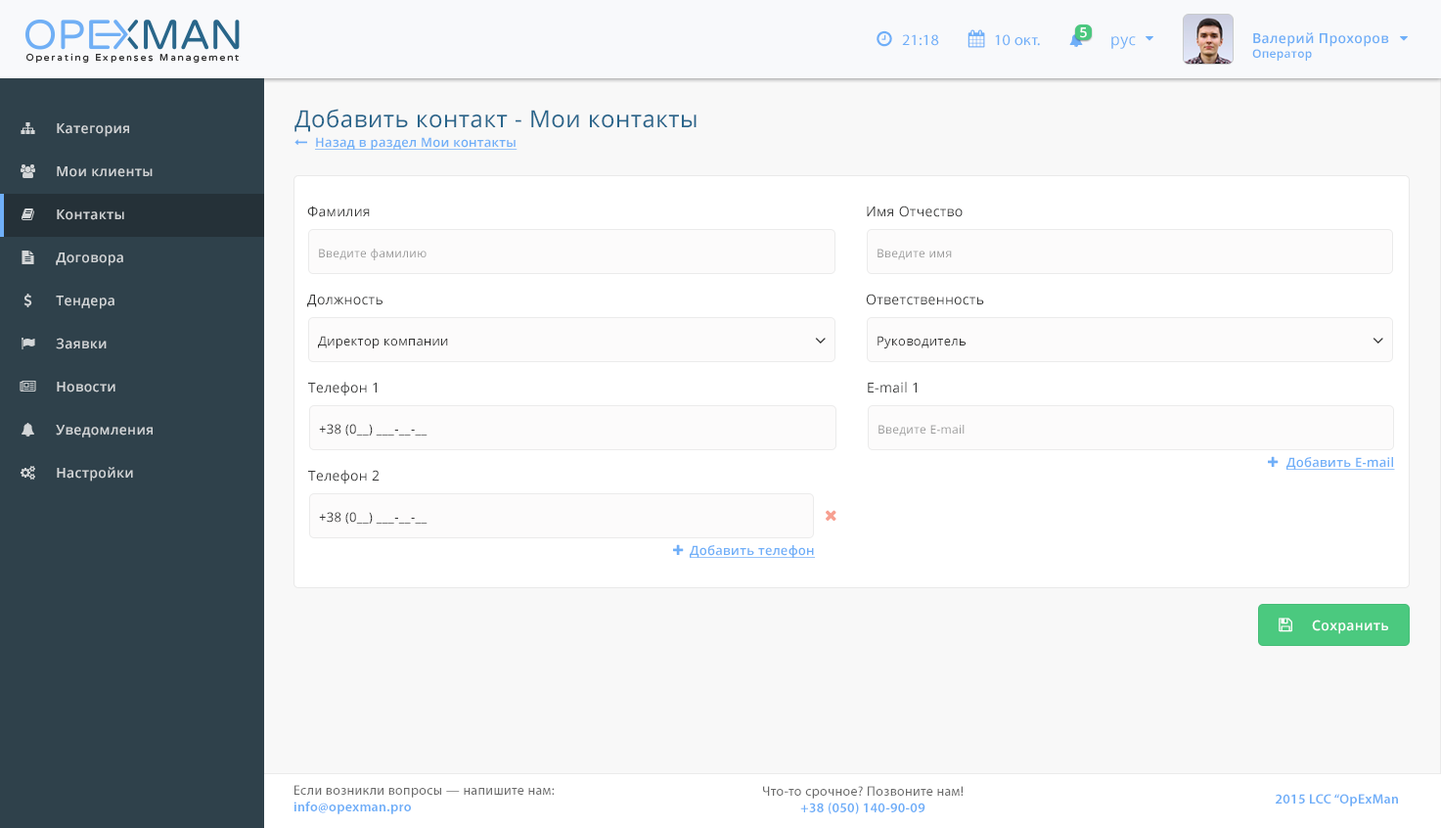
<style>
.page{position:relative;width:1441px;height:828px;background:#ffffff}
.page>*{position:absolute;margin:0}
.t1{font:13.6px "OpenSans-Semibold";letter-spacing:0.025em;color:#ffffff}
.t2{font:15.6px "MyriadPro-Regular";letter-spacing:0.025em;color:#6faff8}
.t3{font:15.6px "OpenSans";letter-spacing:0.025em;color:#6eaff8}
.t4{font:13.6px "OpenSans-Semibold";letter-spacing:0.025em;color:#6eaef7}
.t5{font:11.7px "OpenSans-Semibold";letter-spacing:0.025em;color:#6eaef7}
.t6{font:23.4px "OpenSans";letter-spacing:0.025em;color:#29658b}
.t7{font:13.6px "OpenSans-Semibold";letter-spacing:0.025em;color:#d2d5d7}
.t8{font:12.7px "OpenSans-Semibold";letter-spacing:0.025em;color:#6faff8;text-decoration:underline}
.t9{font:13.6px "OpenSans";letter-spacing:0.025em;color:#373838}
.t10{font:11.7px "OpenSans";letter-spacing:0.025em;color:#999999}
.t11{font:12.7px "OpenSans";letter-spacing:0.025em;color:#333333}
.t12{font:13.6px "MyriadPro-Regular";letter-spacing:0.025em;color:#696969}
.t13{font:13.6px "MyriadPro-Semibold";letter-spacing:0.025em;color:#6eaef8}
</style>
<div class="page">
<p class="t1" style="left:1080px;top:27px;width:7px;height:11px">5</p>
<p class="t1" style="left:1080px;top:27px;width:7px;height:11px">5</p>
<p class="t2" style="left:902px;top:34px;width:37px;height:12px">21:18</p>
<p class="t2" style="left:902px;top:34px;width:37px;height:12px">21:18</p>
<p class="t2" style="left:995px;top:34px;width:45px;height:12px">10 окт.</p>
<p class="t2" style="left:995px;top:34px;width:45px;height:12px">10 окт.</p>
<p class="t3" style="left:1111px;top:36px;width:25px;height:13px">рус</p>
<p class="t3" style="left:1111px;top:36px;width:25px;height:13px">рус</p>
<p class="t4" style="left:1252px;top:32px;width:137px;height:29px">Валерий Прохоров<br><span class="t5">Оператор</span></p>
<p class="t4" style="left:1252px;top:32px;width:137px;height:29px">Валерий Прохоров<br><span class="t5">Оператор</span></p>
<p class="t6" style="left:294px;top:109px;width:402px;height:23px">Добавить контакт - Мои контакты</p>
<p class="t7" style="left:57px;top:123px;width:72px;height:14px">Категория</p>
<p class="t8" style="left:315px;top:137px;width:202px;height:13px">Назад в раздел Мои контакты</p>
<p class="t7" style="left:57px;top:166px;width:96px;height:11px">Мои клиенты</p>
<p class="t7" style="left:57px;top:209px;width:67px;height:11px">Контакты</p>
<p class="t9" style="left:307px;top:205px;width:63px;height:12px">Фамилия</p>
<p class="t9" style="left:867px;top:205px;width:96px;height:12px">Имя Отчество</p>
<p class="t7" style="left:56px;top:252px;width:67px;height:14px">Договора</p>
<p class="t10" style="left:319px;top:248px;width:107px;height:12px">Введите фамилию</p>
<p class="t10" style="left:877px;top:248px;width:75px;height:12px">Введите имя</p>
<p class="t9" style="left:866px;top:293px;width:118px;height:12px">Ответственность</p>
<p class="t7" style="left:56px;top:295px;width:58px;height:14px">Тендера</p>
<p class="t9" style="left:307px;top:294px;width:75px;height:13px">Должность</p>
<p class="t7" style="left:56px;top:337px;width:51px;height:12px">Заявки</p>
<p class="t11" style="left:318px;top:336px;width:130px;height:12px">Директор компании</p>
<p class="t11" style="left:877px;top:336px;width:88px;height:12px">Руководитель</p>
<p class="t7" style="left:57px;top:382px;width:58px;height:10px">Новости</p>
<p class="t9" style="left:308px;top:382px;width:69px;height:14px">Телефон 1</p>
<p class="t9" style="left:868px;top:382px;width:49px;height:11px">E-mail 1</p>
<p class="t7" style="left:56px;top:425px;width:97px;height:12px">Уведомления</p>
<p class="t11" style="left:319px;top:424px;width:108px;height:11px">+38 (0__) ___-__-__</p>
<p class="t10" style="left:878px;top:425px;width:87px;height:11px">Введите E-mail</p>
<p class="t8" style="left:1286px;top:457px;width:109px;height:13px">Добавить E-mail</p>
<p class="t7" style="left:57px;top:467px;width:76px;height:14px">Настройки</p>
<p class="t9" style="left:308px;top:470px;width:72px;height:14px">Телефон 2</p>
<p class="t11" style="left:319px;top:512px;width:108px;height:11px">+38 (0__) ___-__-__</p>
<p class="t8" style="left:690px;top:545px;width:125px;height:13px">Добавить телефон</p>
<p class="t1" style="left:1312px;top:619px;width:76px;height:15px">Сохранить</p>
<p class="t12" style="left:293px;top:785px;width:262px;height:29px">Если возникли вопросы — напишите нам:<br><span class="t13">info@opexman.pro</span></p>
<p class="t12" style="left:763px;top:785px;width:201px;height:29px;text-align:center">Что-то срочное? Позвоните нам!<br><span class="t13">+38 (050) 140-90-09</span></p>
<p class="t13" style="left:1276px;top:793px;width:122px;height:13px">2015 LCC “OpExMan</p>
</div>
